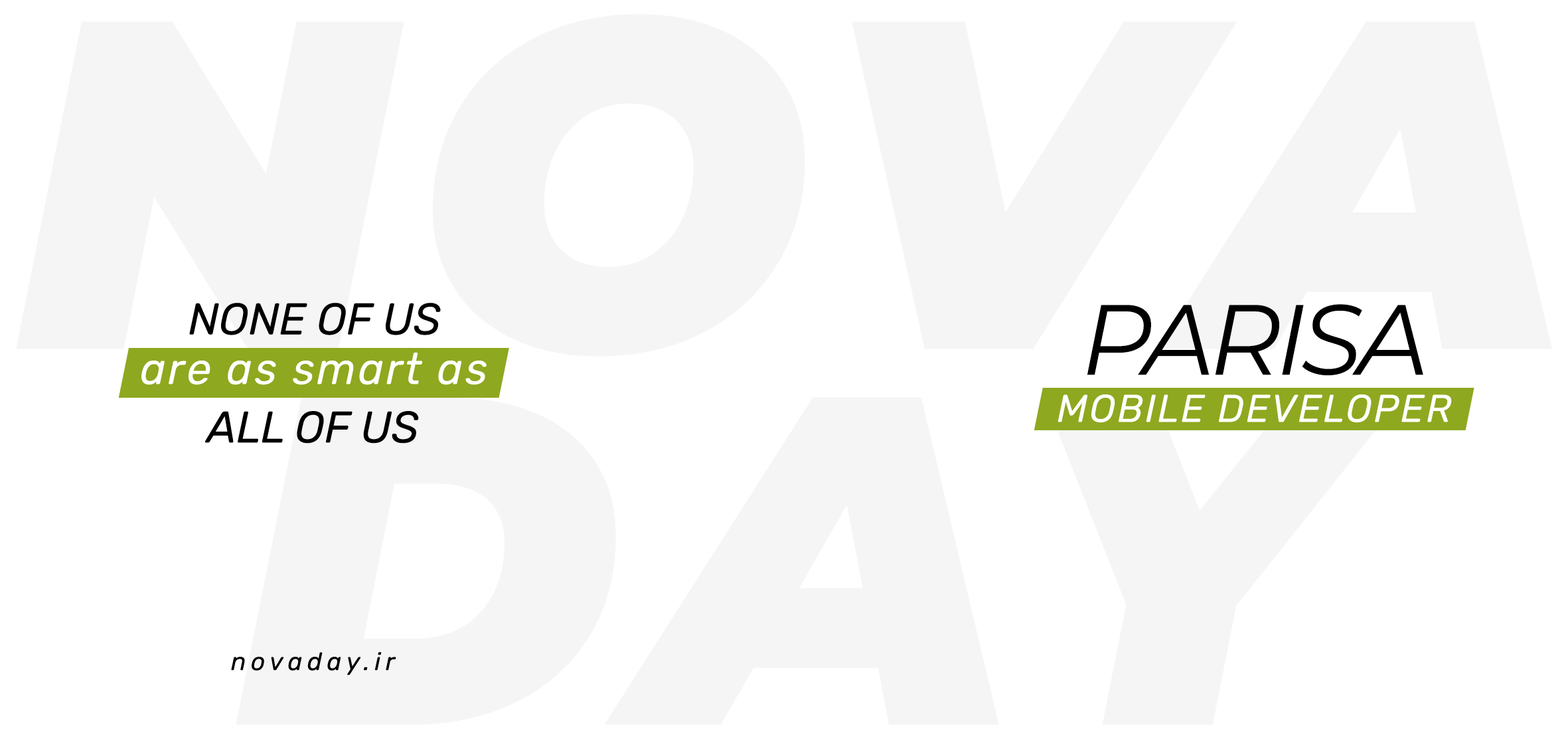
<style>
.page{position:relative;width:1568px;height:745px;background:#ffffff}
.page>*{position:absolute;margin:0}
.t1{font:44.3px "Rubik-Italic";color:#000000}
.t2{font:99.6px "Montserrat-Italic";letter-spacing:-0.05em;color:#000000}
.t3{font:44.3px "Rubik-Italic";letter-spacing:0.05em;color:#ffffff}
.t4{font:38.7px "Rubik-Italic";letter-spacing:0.05em;color:#ffffff}
.t5{font:24.9px "Rubik-Italic";letter-spacing:0.2em;color:#000000}
</style>
<div class="page">
<p class="t1" style="left:189px;top:303px;width:252px;height:32px">NONE OF US</p>
<p class="t2" style="left:1087px;top:304px;width:336px;height:72px">PARISA</p>
<p class="t3" style="left:141px;top:353px;width:346px;height:32px">are as smart as</p>
<p class="t4" style="left:1058px;top:394px;width:394px;height:29px">MOBILE DEVELOPER</p>
<p class="t1" style="left:205px;top:411px;width:214px;height:32px">ALL OF US</p>
<p class="t5" style="left:231px;top:652px;width:165px;height:23px">novaday.ir</p>
</div>
